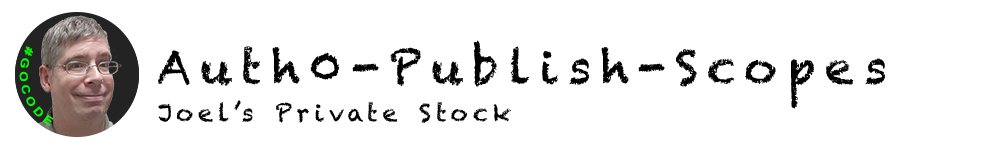
<style>
.page{position:relative;width:1000px;height:150px;background:#ffffff}
.page>*{position:absolute;margin:0}
.t1{font:46px "Chalkduster";letter-spacing:0.2em;color:#000000}
.t2{font:11.2px "Arial-BoldMT";letter-spacing:0.2em;color:#00ff00}
.t3{font:24px "Chalkduster";letter-spacing:0.2em;color:#000000}
</style>
<div class="page">
<p class="t1" style="left:158px;top:40px;width:727px;height:69px">Auth0-Publish-Scopes</p>
<p class="t2" style="left:19px;top:46px;width:35px;height:80px;rotate:72deg">#GOCODE</p>
<p class="t3" style="left:158px;top:100px;width:353px;height:23px">Joel’s Private Stock</p>
</div>
